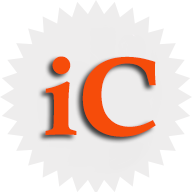
<style>
.page{position:relative;width:192px;height:192px;background:#ffffff}
.page>*{position:absolute;margin:0}
.t1{font:110.2px "CalisMTBol";color:#f64c0a}
</style>
<div class="page">
<p class="t1" style="left:45px;top:56px;width:111px;height:81px">iC</p>
</div>
